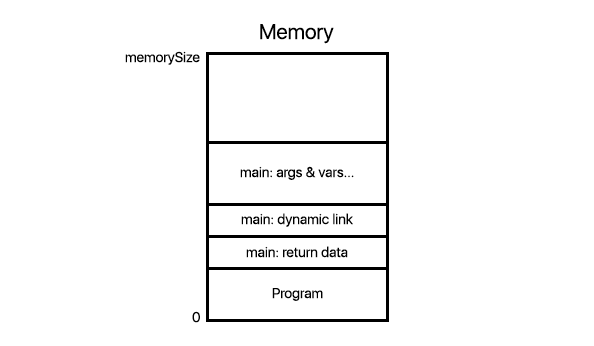
<style>
.page{position:relative;width:594px;height:346px;background:#ffffff}
.page>*{position:absolute;margin:0}
.t1{font:36px "SFUIDisplay-Regular";color:#000000}
.t2{font:24px "SFUIDisplay-Regular";color:#000000}
</style>
<div class="page">
<p class="t1" style="left:260px;top:24px;width:74px;height:20px">Memory</p>
<p class="t2" style="left:125px;top:51px;width:75px;height:14px">memorySize</p>
<p class="t2" style="left:240px;top:166px;width:114px;height:14px">main: args &amp; vars...</p>
<p class="t2" style="left:241px;top:213px;width:112px;height:14px">main: dynamic link</p>
<p class="t2" style="left:246px;top:246px;width:102px;height:12px">main: return data</p>
<p class="t2" style="left:272px;top:288px;width:51px;height:13px">Program</p>
<p class="t2" style="left:192px;top:311px;width:8px;height:12px">0</p>
</div>
